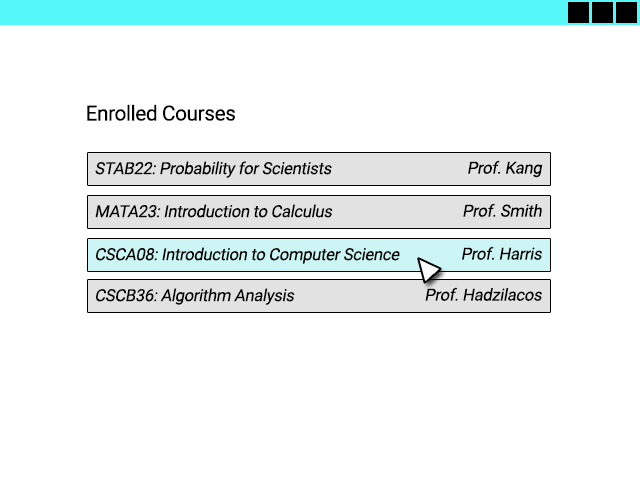
<style>
.page{position:relative;width:640px;height:480px;background:#ffffff}
.page>*{position:absolute;margin:0}
.t1{font:20.8px "Roboto-Regular";letter-spacing:-0.02em;color:#000000}
.t2{font:16.7px "Roboto-Regular";letter-spacing:-0.02em;color:#000000;font-style:italic}
</style>
<div class="page">
<p class="t1" style="left:87px;top:104px;width:148px;height:17px">Enrolled Courses</p>
<p class="t2" style="left:95px;top:161px;width:237px;height:17px">STAB22: Probability for Scientists</p>
<p class="t2" style="left:468px;top:160px;width:75px;height:18px">Prof. Kang</p>
<p class="t2" style="left:95px;top:204px;width:238px;height:14px">MATA23: Introduction to Calculus</p>
<p class="t2" style="left:463px;top:203px;width:79px;height:14px">Prof. Smith</p>
<p class="t2" style="left:462px;top:246px;width:80px;height:14px">Prof. Harris</p>
<p class="t2" style="left:96px;top:247px;width:304px;height:17px">CSCA08: Introduction to Computer Science</p>
<p class="t2" style="left:96px;top:288px;width:199px;height:17px">CSCB36: Algorithm Analysis</p>
<p class="t2" style="left:425px;top:287px;width:117px;height:14px">Prof. Hadzilacos</p>
</div>
